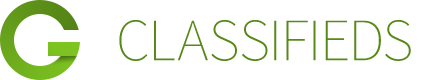
<style>
.page{position:relative;width:440px;height:80px;background:#ffffff}
.page>*{position:absolute;margin:0}
.t1{font:60px "SourceSansPro-ExtraLight";color:#578917;text-transform:uppercase}
</style>
<div class="page">
<p class="t1" style="left:119px;top:20px;width:292px;height:41px">CLASSIFIEDS</p>
</div>
